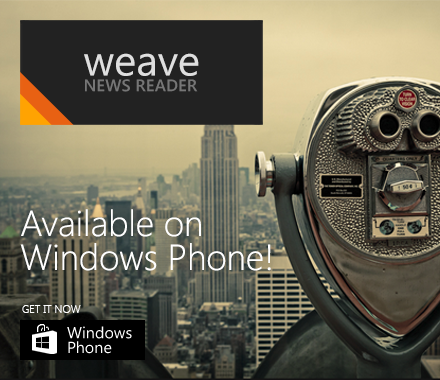
<style>
.page{position:relative;width:440px;height:380px}
.page>*{position:absolute;margin:0}
.t1{font:16.8px/15.7px "SegoeUI-Semibold";color:#767676}
.t2{font:42.5px/15.7px "SegoeUI";color:#dfdfdf}
.t3{font:36.1px/33.9px "SegoeUI-Light";color:#ffffff}
.t4{font:11px "SegoeUI-Light";color:#ffffff}
</style>
<div class="page">
<p class="t1" style="left:84px;top:53px;width:115px;height:39px"><span class="t2">weave<br></span>NEWS READER</p>
<p class="t3" style="left:20px;top:209px;width:251px;height:62px">Available on<br>Windows Phone!</p>
<p class="t4" style="left:22px;top:305px;width:59px;height:8px">GET IT NOW</p>
</div>
